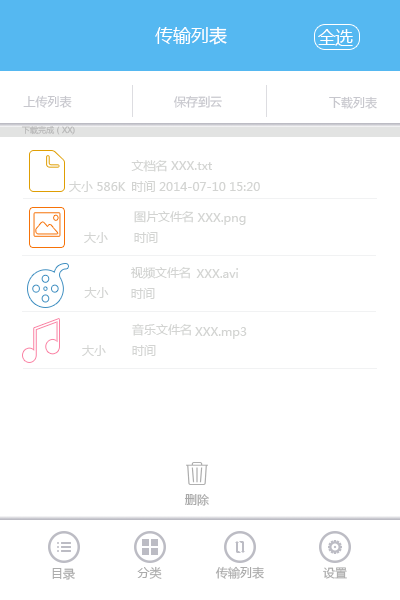
<style>
.page{position:relative;width:400px;height:600px;background:#ffffff}
.page>*{position:absolute;margin:0}
.t1{font:18px "MicrosoftYaHei";color:#ffffff}
.t2{font:12px "MicrosoftYaHei";color:#c7c7cd}
.t3{font:8px "MicrosoftYaHei";color:#b8b8b8}
.t4{font:12px "MicrosoftYaHei";color:#d3d4d2}
.t5{font:12px "MicrosoftYaHei";color:#aaaaaa}
</style>
<div class="page">
<p class="t1" style="left:155px;top:27px;width:72px;height:18px">传输列表</p>
<p class="t1" style="left:318px;top:29px;width:18px;height:16px">全选</p>
<p class="t1" style="left:335px;top:29px;width:18px;height:17px">选</p>
<p class="t2" style="left:23px;top:95px;width:49px;height:13px">上传列表</p>
<p class="t2" style="left:173px;top:95px;width:49px;height:13px">保存到云</p>
<p class="t2" style="left:329px;top:96px;width:48px;height:13px">下载列表</p>
<p class="t3" style="left:22px;top:126px;width:53px;height:9px">下载完成（XX)</p>
<p class="t4" style="left:131px;top:160px;width:129px;height:32px">文档名 XXX.txt<br>时间 2014-07-10 15:20</p>
<p class="t4" style="left:69px;top:181px;width:57px;height:11px">大小 586K</p>
<p class="t4" style="left:134px;top:211px;width:59px;height:32px">图片文件名<br>时间</p>
<p class="t4" style="left:197px;top:213px;width:49px;height:12px">XXX.png</p>
<p class="t4" style="left:84px;top:232px;width:24px;height:11px">大小</p>
<p class="t4" style="left:131px;top:267px;width:59px;height:32px">视频文件名<br>时间</p>
<p class="t4" style="left:196px;top:268px;width:42px;height:10px">XXX.avi</p>
<p class="t4" style="left:84px;top:287px;width:25px;height:11px">大小</p>
<p class="t4" style="left:132px;top:323px;width:59px;height:33px">音乐文件名<br>时间</p>
<p class="t4" style="left:195px;top:327px;width:52px;height:12px">XXX.mp3</p>
<p class="t4" style="left:82px;top:345px;width:24px;height:11px">大小</p>
<p class="t5" style="left:185px;top:494px;width:24px;height:12px">删除</p>
<p class="t5" style="left:52px;top:568px;width:23px;height:12px">目录</p>
<p class="t5" style="left:137px;top:566px;width:25px;height:13px">分类</p>
<p class="t5" style="left:215px;top:566px;width:49px;height:13px">传输列表</p>
<p class="t5" style="left:323px;top:567px;width:24px;height:12px">设置</p>
</div>
